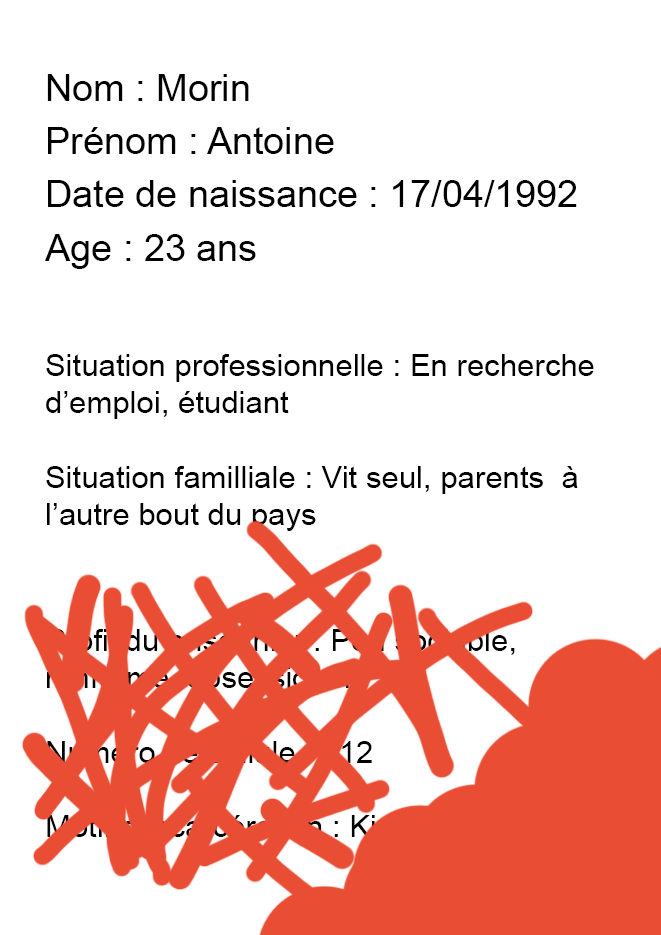
<style>
.page{position:relative;width:661px;height:935px;background:#ffffff}
.page>*{position:absolute;margin:0}
.t1{font:37.8px/53.3px "ArialMT";color:#000000}
.t2{font:31.1px "ArialMT";color:#000000}
.t3{font:31.1px "ArialMT";color:#e94d34}
</style>
<div class="page">
<p class="t1" style="left:45px;top:74px;width:532px;height:195px">Nom : Morin<br>Prénom : Antoine<br>Date de naissance : 17/04/1992<br>Age : 23 ans</p>
<p class="t2" style="left:46px;top:354px;width:548px;height:177px">Situation professionnelle : En recherche d’emploi, étudiant<br><br>Situation familliale : Vit seul, parents  à l’autre bout du pays</p>
<p class="t3" style="left:47px;top:629px;width:551px;height:214px">Profil du prisonnier : Peu sociable, renfermé, obsessionel<br><br>Numéro de cellule : 012<br><br>Motif d’incarcération : Kidnapping et Viol</p>
</div>
